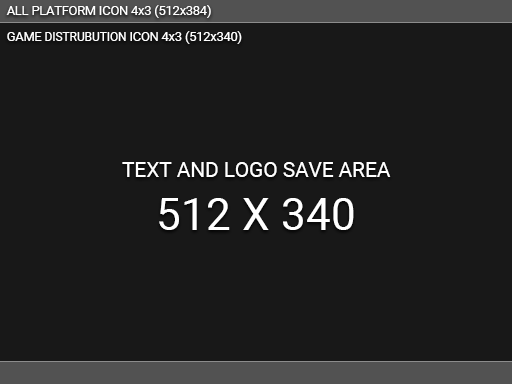
<style>
.page{position:relative;width:512px;height:384px;background:#181818}
.page>*{position:absolute;margin:0}
.t1{font:12.5px "Roboto-Regular";color:#ffffff}
.t2{font:11.9px "Roboto-Regular";color:#ffffff}
.t3{font:20.7px "Roboto-Regular";color:#ffffff}
.t4{font:44.4px "Roboto-Regular";color:#ffffff}
</style>
<div class="page">
<p class="t1" style="left:6px;top:5px;width:205px;height:13px">ALL PLATFORM ICON 4x3 (512x384)</p>
<p class="t1" style="left:7px;top:31px;width:235px;height:13px">GAME <span class="t2">DISTRUBUTION </span>ICON 4x3 (512x340)</p>
<p class="t3" style="left:122px;top:162px;width:269px;height:68px;text-align:center">TEXT AND LOGO SAVE AREA<br><span class="t4">512 X 340</span></p>
</div>
